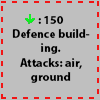
<style>
.page{position:relative;width:100px;height:100px;background:#bfbfbf}
.page>*{position:absolute;margin:0}
.t1{font:12px "MyriadPro-Bold";color:#000000}
</style>
<div class="page">
<p class="t1" style="left:12px;top:16px;width:78px;height:67px;text-align:center">: 150<br>Defence building.<br>Attacks: air, ground</p>
</div>
